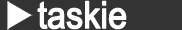
<style>
.page{position:relative;width:182px;height:30px;background:#333333}
.page>*{position:absolute;margin:0}
.t1{font:37.4px "ArialNarrow";letter-spacing:-0.02em;color:#ffffff;font-weight:bold;scale:1.1 1}
</style>
<div class="page">
<p class="t1" style="left:37px;top:0px;width:90px;height:30px">taskie</p>
</div>
